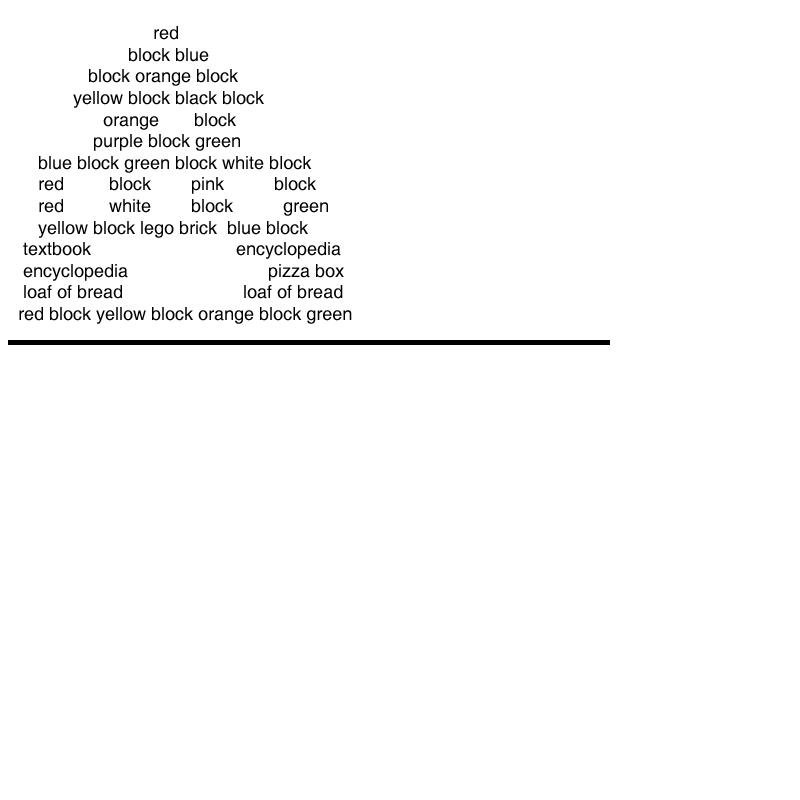
<style>
.page{position:relative;width:800px;height:800px;background:#ffffff}
.page>*{position:absolute;margin:0}
.t1{font:18px "Helvetica";color:#000000}
</style>
<div class="page">
<p class="t1" style="left:19px;top:26px;width:333px;height:298px">red <br>                      block blue <br>              block orange block <br>           yellow block black block<br>                 orange       block <br>               purple block green<br>    blue block green block white block<br>    red         block        pink          block<br>    red         white        block          green<br>    yellow block lego brick  blue block<br> textbook                             encyclopedia<br> encyclopedia                            pizza box<br> loaf of bread                        loaf of bread<br>red block yellow block orange block green</p>
</div>
